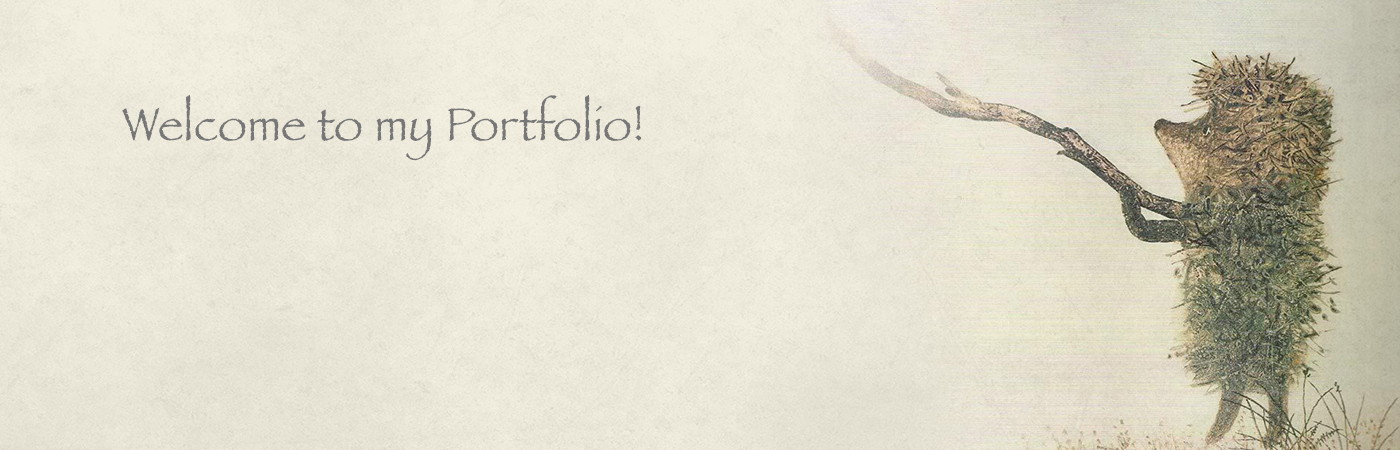
<style>
.page{position:relative;width:1400px;height:450px}
.page>*{position:absolute;margin:0}
.t1{font:48px "Papyrus";color:#777777}
</style>
<div class="page">
<p class="t1" style="left:122px;top:95px;width:520px;height:66px">Welcome to my Portfolio!</p>
</div>
